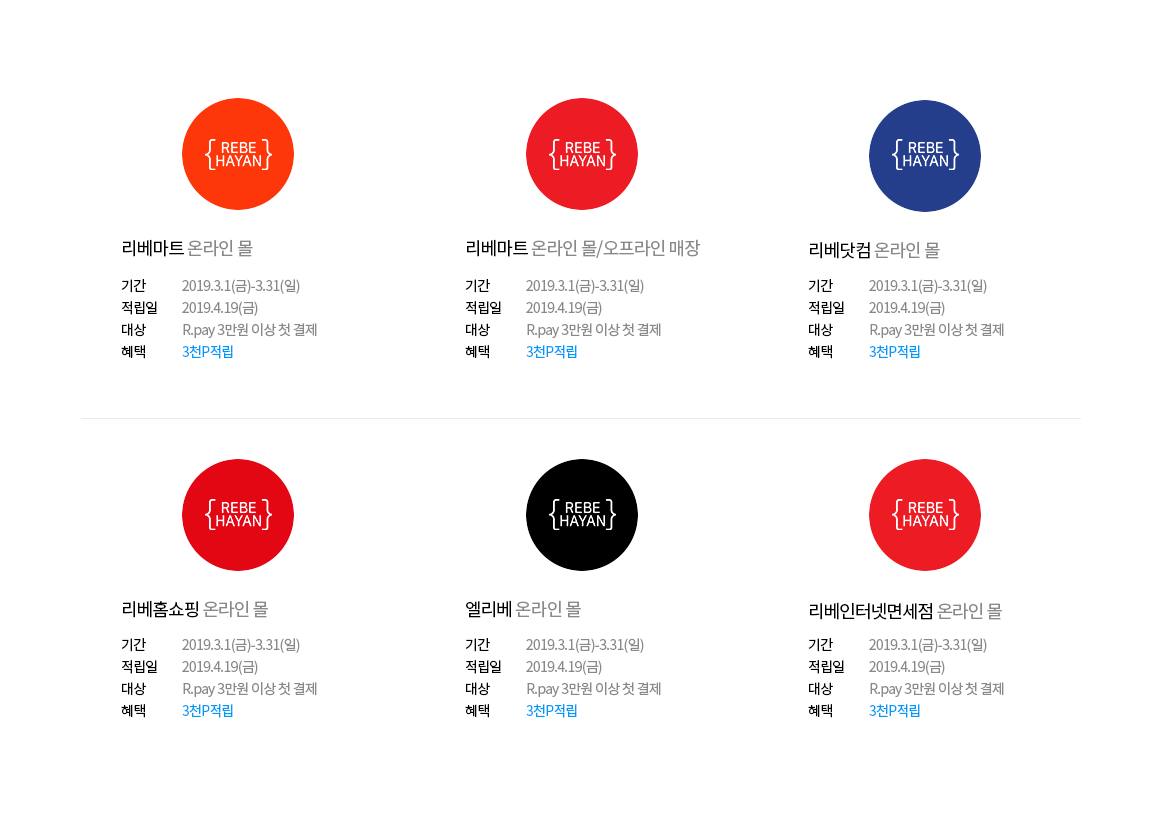
<style>
.page{position:relative;width:1162px;height:833px;background:#ffffff}
.page>*{position:absolute;margin:0}
.t1{font:18px "NotoSansKR-Regular";letter-spacing:-0.05em;color:#898989}
.t2{font:18px "NotoSansKR-Regular";letter-spacing:-0.05em;color:#000000}
.t3{font:14px/22px "NotoSansKR-Regular";letter-spacing:-0.05em;color:#000000}
.t4{font:14px/22px "NotoSansKR-Regular";letter-spacing:-0.05em;color:#898989}
.t5{font:14px/22px "NotoSansKR-Regular";letter-spacing:-0.05em;color:#009bfa}
</style>
<div class="page">
<p class="t1" style="left:123px;top:239px;width:130px;height:18px"><span class="t2">리베마트 </span>온라인 몰</p>
<p class="t1" style="left:467px;top:239px;width:234px;height:19px"><span class="t2">리베마트 </span>온라인 몰/오프라인 매장</p>
<p class="t1" style="left:810px;top:241px;width:130px;height:18px"><span class="t2">리베닷컴 </span>온라인 몰</p>
<p class="t3" style="left:121px;top:279px;width:36px;height:80px">기간<br>적립일<br>대상<br>혜택</p>
<p class="t4" style="left:182px;top:279px;width:135px;height:80px">2019.3.1(금)-3.31(일)<br>2019.4.19(금)<br>R.pay 3만원 이상 첫 결제<br><span class="t5">3천P적립</span></p>
<p class="t3" style="left:465px;top:279px;width:36px;height:80px">기간<br>적립일<br>대상<br>혜택</p>
<p class="t4" style="left:526px;top:279px;width:135px;height:80px">2019.3.1(금)-3.31(일)<br>2019.4.19(금)<br>R.pay 3만원 이상 첫 결제<br><span class="t5">3천P적립</span></p>
<p class="t3" style="left:808px;top:279px;width:36px;height:80px">기간<br>적립일<br>대상<br>혜택</p>
<p class="t4" style="left:869px;top:279px;width:135px;height:80px">2019.3.1(금)-3.31(일)<br>2019.4.19(금)<br>R.pay 3만원 이상 첫 결제<br><span class="t5">3천P적립</span></p>
<p class="t2" style="left:123px;top:600px;width:145px;height:18px">리베홈쇼핑 <span class="t1">온라인 몰</span></p>
<p class="t1" style="left:466px;top:600px;width:115px;height:18px"><span class="t2">엘리베 </span>온라인 몰</p>
<p class="t2" style="left:810px;top:602px;width:192px;height:18px">리베인터넷면세점 <span class="t1">온라인 몰</span></p>
<p class="t3" style="left:121px;top:638px;width:36px;height:80px">기간<br>적립일<br>대상<br>혜택</p>
<p class="t4" style="left:182px;top:638px;width:135px;height:80px">2019.3.1(금)-3.31(일)<br>2019.4.19(금)<br>R.pay 3만원 이상 첫 결제<br><span class="t5">3천P적립</span></p>
<p class="t3" style="left:465px;top:638px;width:36px;height:80px">기간<br>적립일<br>대상<br>혜택</p>
<p class="t4" style="left:526px;top:638px;width:135px;height:80px">2019.3.1(금)-3.31(일)<br>2019.4.19(금)<br>R.pay 3만원 이상 첫 결제<br><span class="t5">3천P적립</span></p>
<p class="t3" style="left:808px;top:638px;width:36px;height:80px">기간<br>적립일<br>대상<br>혜택</p>
<p class="t4" style="left:869px;top:638px;width:135px;height:80px">2019.3.1(금)-3.31(일)<br>2019.4.19(금)<br>R.pay 3만원 이상 첫 결제<br><span class="t5">3천P적립</span></p>
</div>
